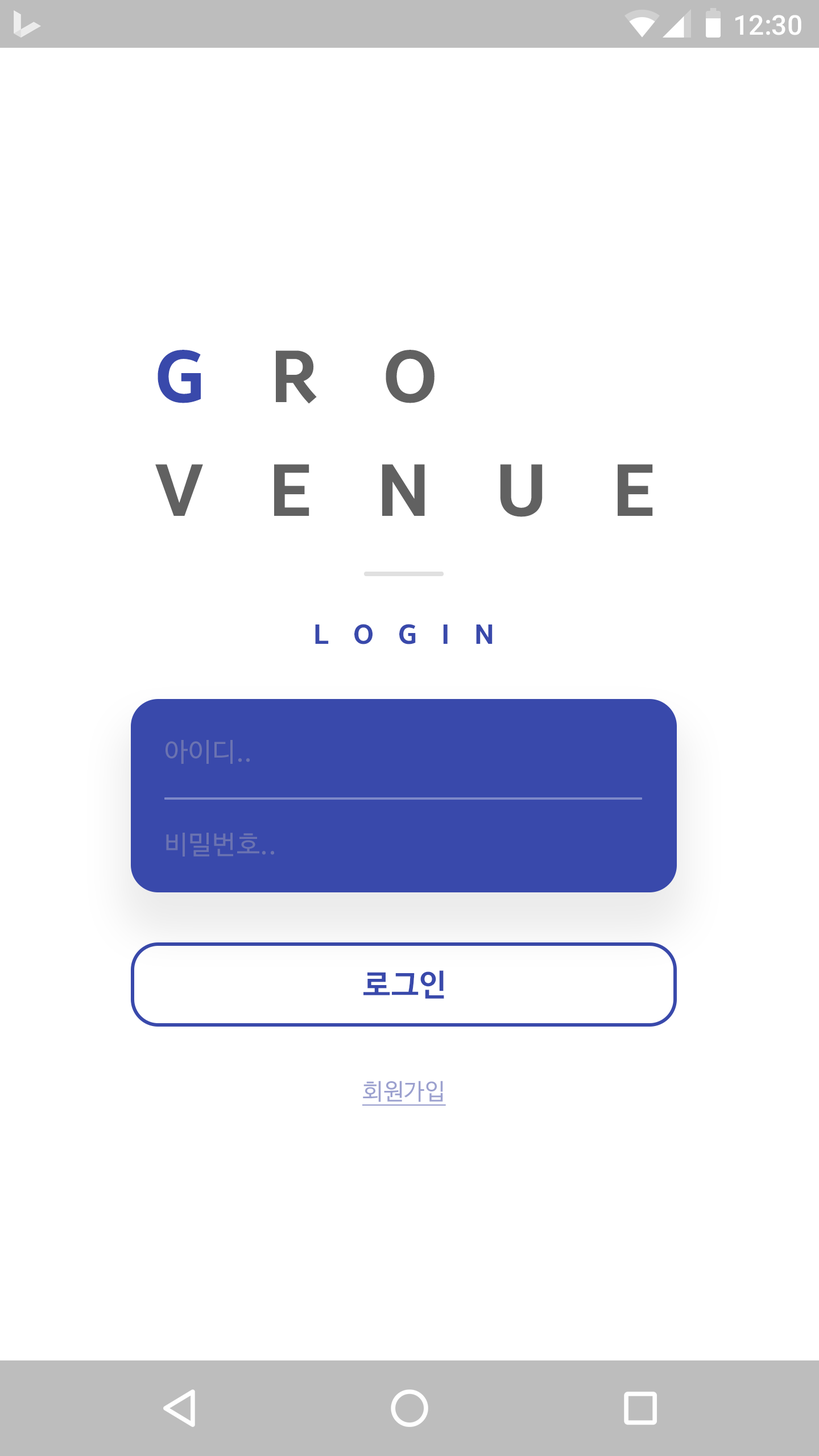
<style>
.page{position:relative;width:819px;height:1456px;background:#ffffff}
.page>*{position:absolute;margin:0}
.t1{font:27.3px "Roboto-Medium";color:#ffffff}
.t2{font:72.8px/113.7px "BreezeSans-Bold";letter-spacing:0.9em;color:#616161}
.t3{font:72.8px/113.7px "BreezeSans-Bold";letter-spacing:0.9em;color:#3949ab}
.t4{font:27.3px "BreezeSans-Bold";letter-spacing:0.9em;color:#3949ab}
.t5{font:26.2px "NanumBarunGothic";letter-spacing:0.025em;color:#6b73b1}
.t6{font:30.7px "NanumBarunGothicBold";letter-spacing:0.025em;color:#3949ab}
.t7{font:22.7px "NanumBarunGothic";letter-spacing:0.025em;color:#9ca1cf;text-decoration:underline}
</style>
<div class="page">
<p class="t1" style="left:735px;top:15px;width:66px;height:20px">12:30</p>
<p class="t2" style="left:155px;top:350px;width:498px;height:167px"><span class="t3">G</span>RO<br>VENUE</p>
<p class="t4" style="left:315px;top:624px;width:178px;height:20px">LOGIN</p>
<p class="t5" style="left:166px;top:740px;width:84px;height:24px">아이디..</p>
<p class="t5" style="left:166px;top:833px;width:108px;height:24px">비밀번호..</p>
<p class="t6" style="left:363px;top:970px;width:81px;height:29px">로그인</p>
<p class="t7" style="left:362px;top:1081px;width:84px;height:25px">회원가입</p>
</div>
